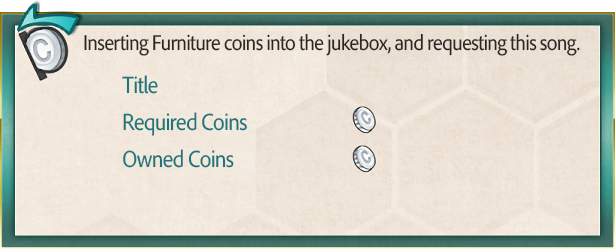
<style>
.page{position:relative;width:615px;height:249px}
.page>*{position:absolute;margin:0}
.t1{font:22px "AdobeClean-Regular";letter-spacing:-0.04em;color:#2b2722;scale:0.9 1}
.t2{font:24px "AdobeClean-Regular";letter-spacing:-0.04em;color:#1d767b;scale:0.9 1}
</style>
<div class="page">
<p class="t1" style="left:84px;top:33px;width:496px;height:23px">Inserting Furniture coins into the jukebox, and requesting this song.</p>
<p class="t2" style="left:122px;top:75px;width:36px;height:19px">Title</p>
<p class="t2" style="left:123px;top:112px;width:124px;height:24px">Required Coins</p>
<p class="t2" style="left:123px;top:149px;width:111px;height:19px">Owned Coins</p>
</div>
